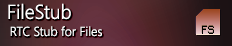
<style>
.page{position:relative;width:232px;height:46px}
.page>*{position:absolute;margin:0}
.t1{font:20px "SegoeUI-Semilight";color:#ffffff;scale:0.96 1}
.t2{font:13px "SegoeUI-Semilight";color:#ffffff;scale:0.96 1}
</style>
<div class="page">
<p class="t1" style="left:8px;top:3px;width:63px;height:17px">FileStub</p>
<p class="t2" style="left:10px;top:26px;width:92px;height:11px">RTC Stub for Files</p>
</div>
